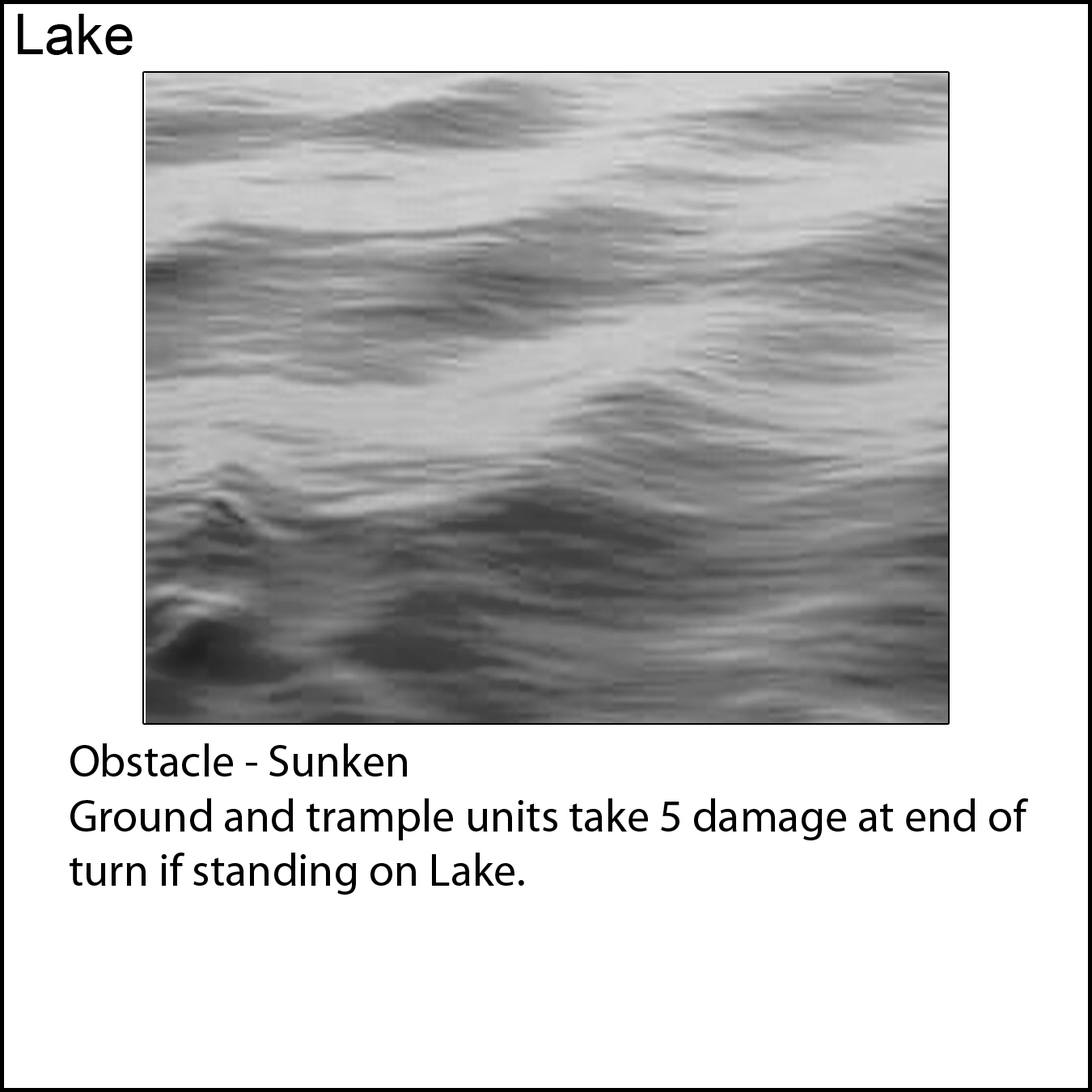
<style>
.page{position:relative;width:1092px;height:1092px;background:#ffffff}
.page>*{position:absolute;margin:0}
.t1{font:55.6px "ArialMT";color:#000000}
.t2{font:45.5px "MyriadPro-Regular";color:#000000}
</style>
<div class="page">
<p class="t1" style="left:18px;top:14px;width:115px;height:41px">Lake</p>
<p class="t2" style="left:70px;top:743px;width:958px;height:152px">Obstacle - Sunken<br>Ground and trample units take 5 damage at end of turn if standing on Lake.</p>
</div>
